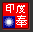
<style>
.page{position:relative;width:33px;height:32px;background:#f20000}
.page>*{position:absolute;margin:0}
.t1{font:10.4px "SimSun";color:#ffffff}
.t2{font:11.7px "SimSun";color:#ffffff}
</style>
<div class="page">
<p class="t1" style="left:6px;top:4px;width:19px;height:9px">印度</p>
<p class="t2" style="left:16px;top:15px;width:11px;height:12px">奉</p>
</div>
